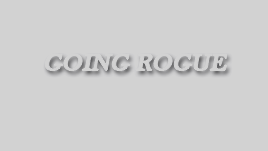
<style>
.page{position:relative;width:268px;height:151px;background:#d2d2d2}
.page>*{position:absolute;margin:0}
.t1{font:24px "BaskOldFace";color:#d2d2d2;font-weight:bold;font-style:italic}
</style>
<div class="page">
<p class="t1" style="left:45px;top:54px;width:182px;height:17px">GOING ROGUE</p>
</div>
